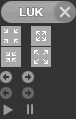
<style>
.page{position:relative;width:76px;height:119px;background:#333333}
.page>*{position:absolute;margin:0}
.t1{font:11.3px "Arial-BoldMT";color:#ffffff;text-transform:uppercase}
</style>
<div class="page">
<p class="t1" style="left:19px;top:8px;width:25px;height:8px">Luk</p>
</div>
